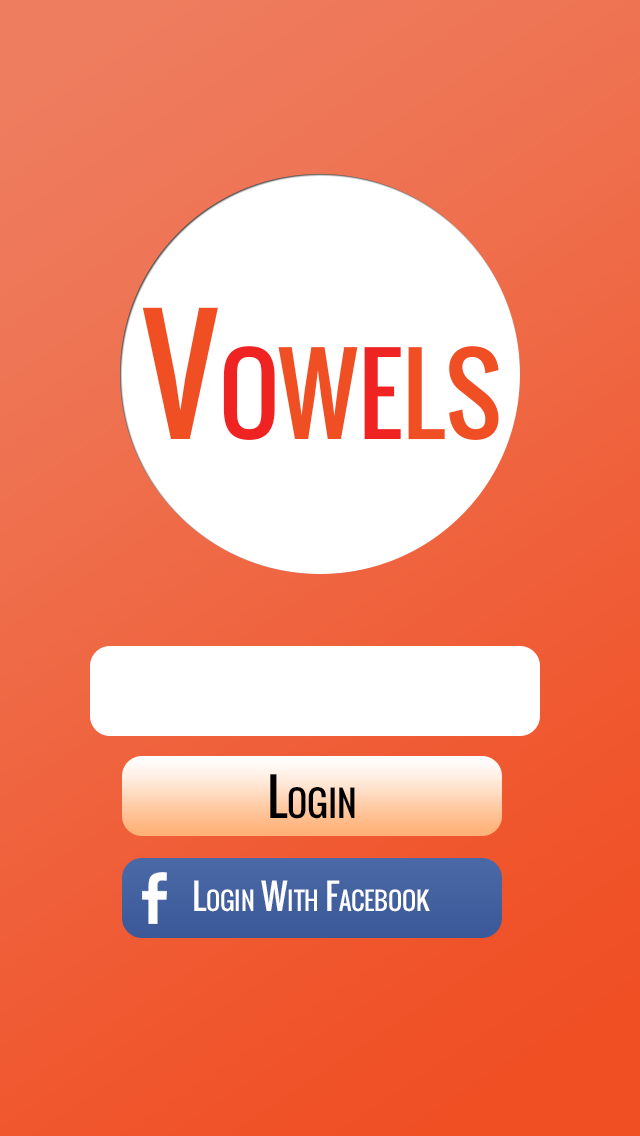
<style>
.page{position:relative;width:640px;height:1136px;background:#ffffff}
.page>*{position:absolute;margin:0}
.t1{font:150px "Oswald";color:#f04e23;font-variant:small-caps}
.t2{font:150px "Oswald";color:#f02323;font-variant:small-caps}
.t3{font:50px "Oswald";color:#000000;font-variant:small-caps}
.t4{font:35px "Oswald";color:#ffffff;font-variant:small-caps}
</style>
<div class="page">
<p class="t1" style="left:142px;top:307px;width:357px;height:133px">V<span class="t2">o</span>w<span class="t2">e</span>ls</p>
<p class="t3" style="left:270px;top:774px;width:85px;height:45px">Login</p>
<p class="t4" style="left:194px;top:880px;width:236px;height:32px">Login With Facebook</p>
</div>
